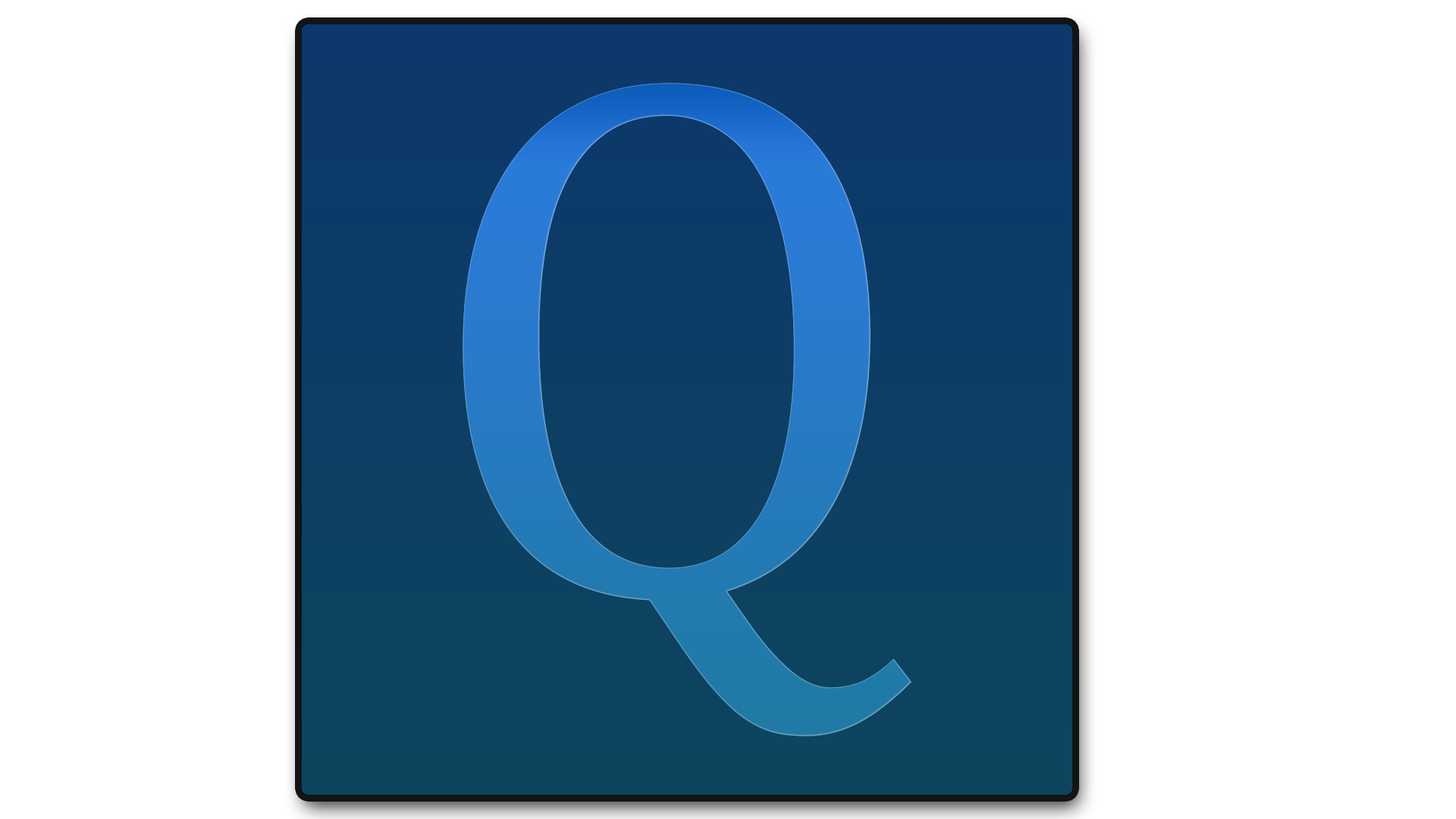
<style>
.page{position:relative;width:1456px;height:819px;background:#ffffff}
.page>*{position:absolute;margin:0}
.t1{font:758.3px "CambriaMath";color:#277ac5}
</style>
<div class="page">
<p class="t1" style="left:463px;top:83px;width:449px;height:653px">Q</p>
</div>
